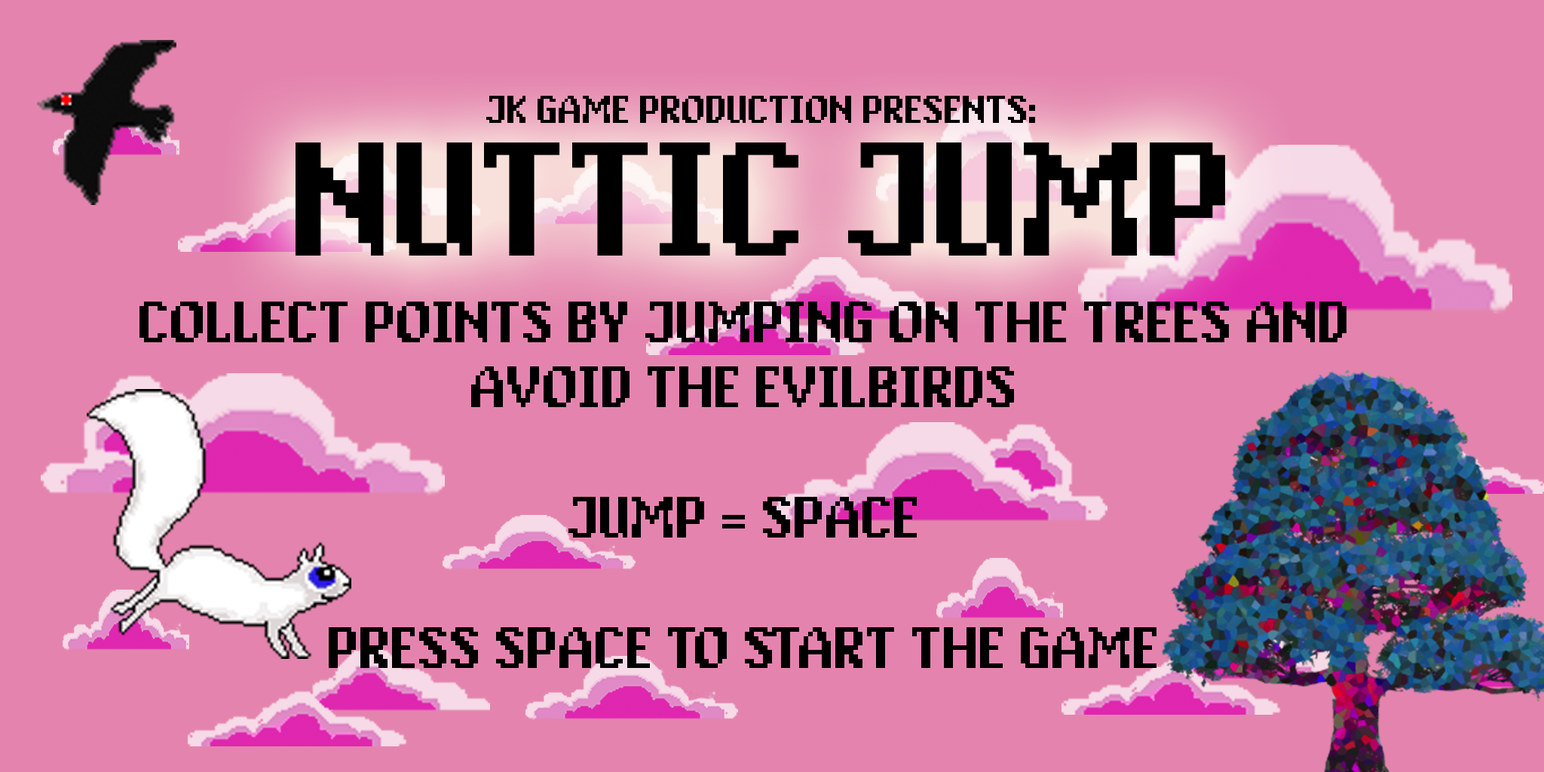
<style>
.page{position:relative;width:1544px;height:772px;background:#e484ae}
.page>*{position:absolute;margin:0}
.t1{font:36.2px "PixAntiqua";color:#000000}
.t2{font:150.8px "PixAntiqua";color:#000000}
.t3{font:54.3px "PixAntiqua";color:#000000}
</style>
<div class="page">
<p class="t1" style="left:486px;top:96px;width:549px;height:27px">JK GAME PRODUCTION PRESENTS:</p>
<p class="t2" style="left:296px;top:143px;width:929px;height:113px">NUTTIC JUMP</p>
<p class="t3" style="left:139px;top:302px;width:1208px;height:366px;text-align:center">COLLECT POINTS BY JUMPING ON THE TREES AND AVOID THE EVILBIRDS<br><br>JUMP = SPACE<br><br>PRESS SPACE TO START THE GAME</p>
</div>
